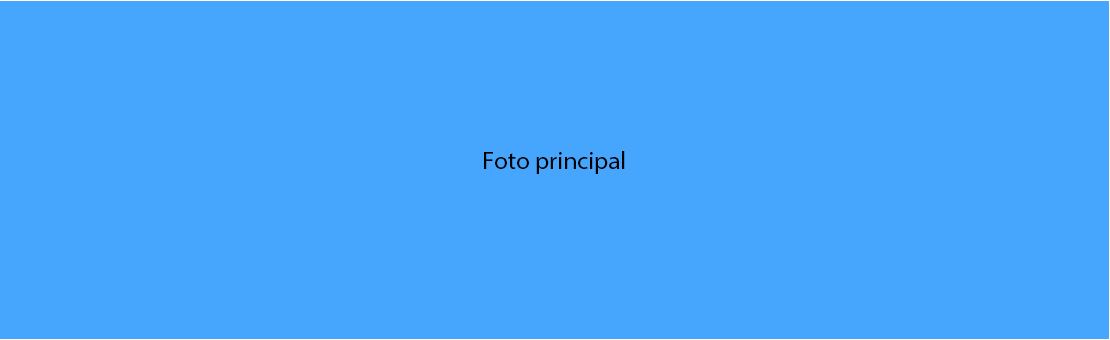
<style>
.page{position:relative;width:1110px;height:340px;background:#46a5fd}
.page>*{position:absolute;margin:0}
.t1{font:25px "MyriadPro-Regular";color:#000000}
</style>
<div class="page">
<p class="t1" style="left:484px;top:151px;width:141px;height:23px">Foto principal</p>
</div>
